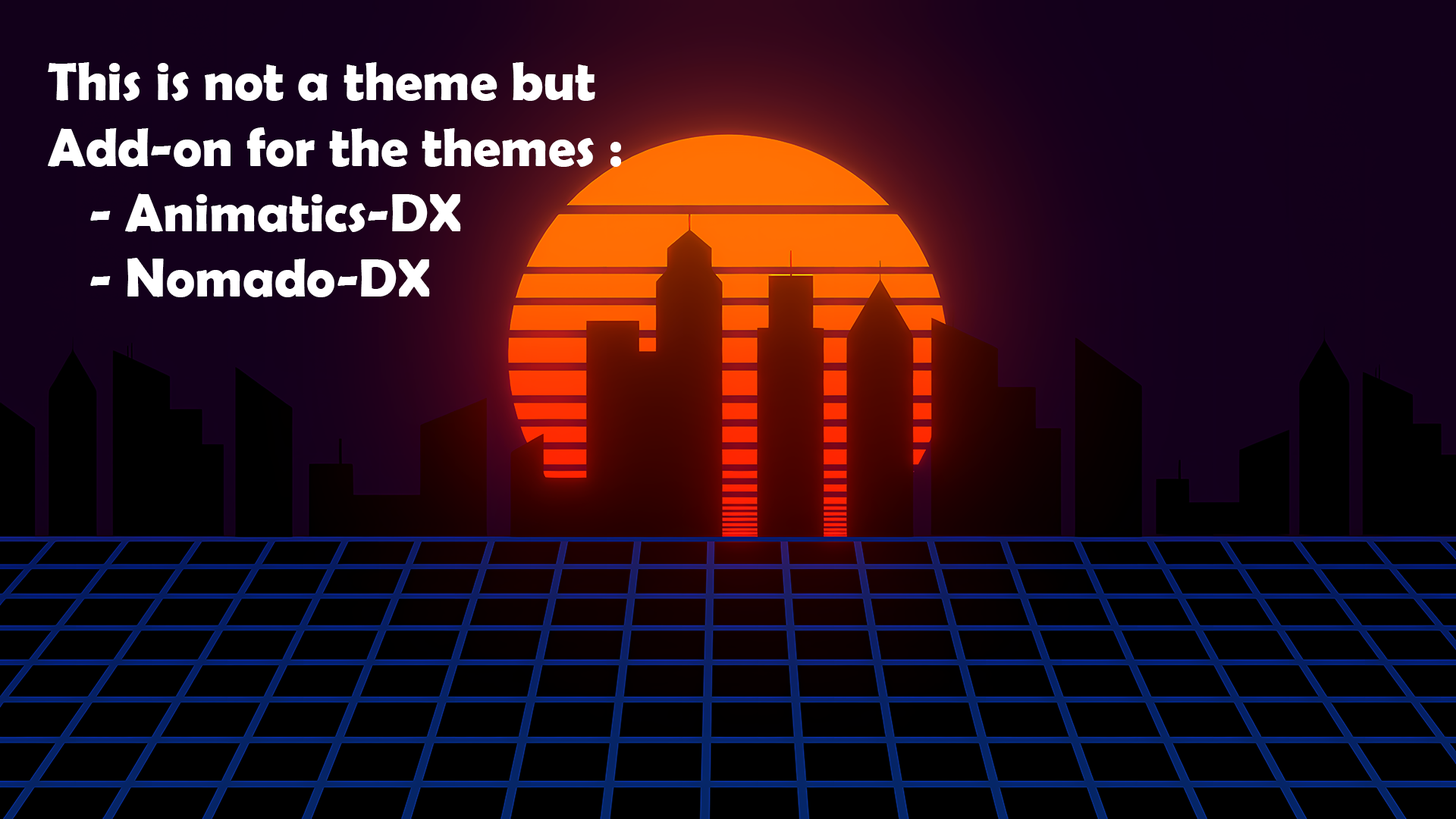
<style>
.page{position:relative;width:1456px;height:819px;background:#000000}
.page>*{position:absolute;margin:0}
.t1{font:54.6px "BerlinSansFBDemi-Bold";color:#ffffff}
</style>
<div class="page">
<p class="t1" style="left:48px;top:62px;width:573px;height:235px">This is not a theme but<br>Add-on for the themes :<br>   - Animatics-DX<br>   - Nomado-DX</p>
</div>
